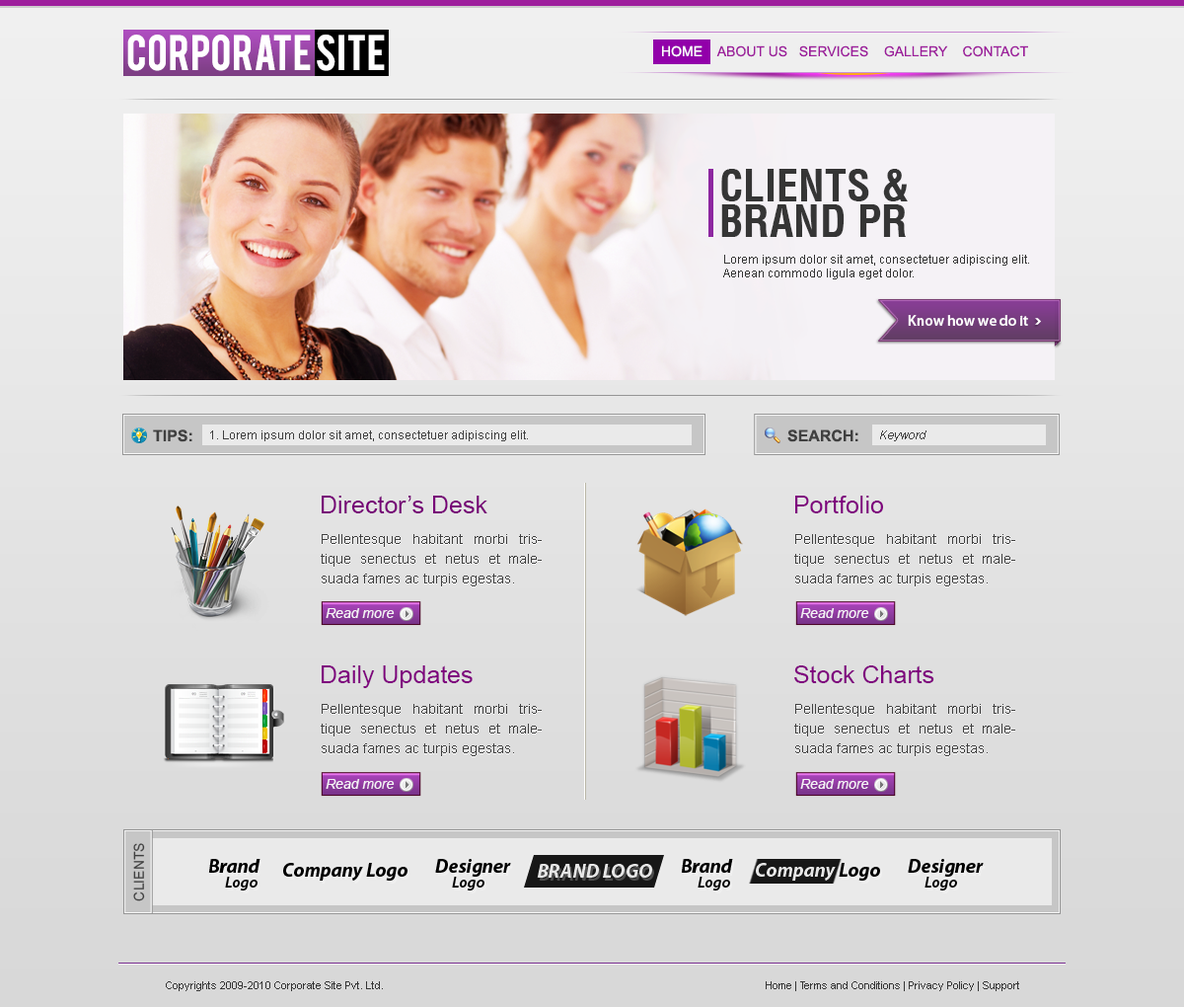
<style>
.page{position:relative;width:1184px;height:1007px}
.page>*{position:absolute;margin:0}
.t1{font:39.2px "Bebas";color:#ffffff}
.t2{font:13.8px "ArialMT";color:#9d1e9c}
.t3{font:13.8px "ArialMT";color:#ffffff}
.t4{font:43.2px/35.5px "HelveticaCondensedBold";color:#353535;text-transform:uppercase}
.t5{font:11.9px "ArialMT";color:#353535}
.t6{font:14.8px "MyriadPro-Semibold";color:#ffffff}
.t7{font:15.8px "Arial-BoldMT";color:#404040}
.t8{font:11.8px "ArialMT";color:#404040}
.t9{font:11.8px "Arial-ItalicMT";color:#404040}
.t10{font:24.7px "ArialMT";color:#770077}
.t11{font:24.7px "ArialMT";color:#7f007e}
.t12{font:13.8px/19.7px "ArialMT";color:#404040}
.t13{font:13.8px "Arial-ItalicMT";color:#f5f2f6}
.t14{font:13.8px "ArialMT";color:#404040}
.t15{font:10.9px "ArialMT";color:#353535}
</style>
<div class="page">
<p class="t1" style="left:127px;top:35px;width:258px;height:36px">CORPORATE SITE</p>
<p class="t2" style="left:662px;top:45px;width:366px;height:12px"><span class="t3">HOME   </span> ABOUT US   SERVICES    GALLERY    CONTACT</p>
<p class="t4" style="left:722px;top:169px;width:186px;height:68px">CLIENTS &amp;<br>BRAND PR</p>
<p class="t5" style="left:723px;top:255px;width:306px;height:24px">Lorem ipsum dolor sit amet, consectetuer adipiscing elit. <br>Aenean commodo ligula eget dolor.</p>
<p class="t6" style="left:908px;top:315px;width:120px;height:11px">Know how we do it</p>
<p class="t7" style="left:153px;top:429px;width:39px;height:13px">TIPS:</p>
<p class="t8" style="left:210px;top:430px;width:318px;height:11px">1. Lorem ipsum dolor sit amet, consectetuer adipiscing elit.</p>
<p class="t7" style="left:788px;top:429px;width:71px;height:13px">SEARCH:</p>
<p class="t9" style="left:880px;top:430px;width:47px;height:11px">Keyword</p>
<p class="t10" style="left:322px;top:495px;width:166px;height:18px">Director’s Desk</p>
<p class="t11" style="left:796px;top:495px;width:87px;height:18px">Portfolio</p>
<p class="t12" style="left:321px;top:534px;width:221px;height:52px;text-align:justify">Pellentesque habitant morbi tristique senectus et netus et malesuada fames ac turpis egestas.</p>
<p class="t12" style="left:795px;top:534px;width:221px;height:52px;text-align:justify">Pellentesque habitant morbi tristique senectus et netus et malesuada fames ac turpis egestas.</p>
<p class="t13" style="left:326px;top:608px;width:69px;height:10px">Read more</p>
<p class="t13" style="left:800px;top:608px;width:70px;height:10px">Read more</p>
<p class="t11" style="left:322px;top:665px;width:151px;height:23px">Daily Updates</p>
<p class="t11" style="left:795px;top:665px;width:140px;height:18px">Stock Charts</p>
<p class="t12" style="left:321px;top:704px;width:221px;height:52px;text-align:justify">Pellentesque habitant morbi tristique senectus et netus et malesuada fames ac turpis egestas.</p>
<p class="t12" style="left:795px;top:704px;width:221px;height:52px;text-align:justify">Pellentesque habitant morbi tristique senectus et netus et malesuada fames ac turpis egestas.</p>
<p class="t13" style="left:326px;top:779px;width:69px;height:10px">Read more</p>
<p class="t13" style="left:800px;top:779px;width:70px;height:10px">Read more</p>
<p class="t14" style="left:133px;top:843px;width:12px;height:58px;rotate:-90deg">CLIENTS</p>
<p class="t15" style="left:166px;top:981px;width:217px;height:10px">Copyrights 2009-2010 Corporate Site Pvt. Ltd.</p>
<p class="t15" style="left:766px;top:981px;width:254px;height:10px">Home | Terms and Conditions | Privacy Policy | Support</p>
</div>
